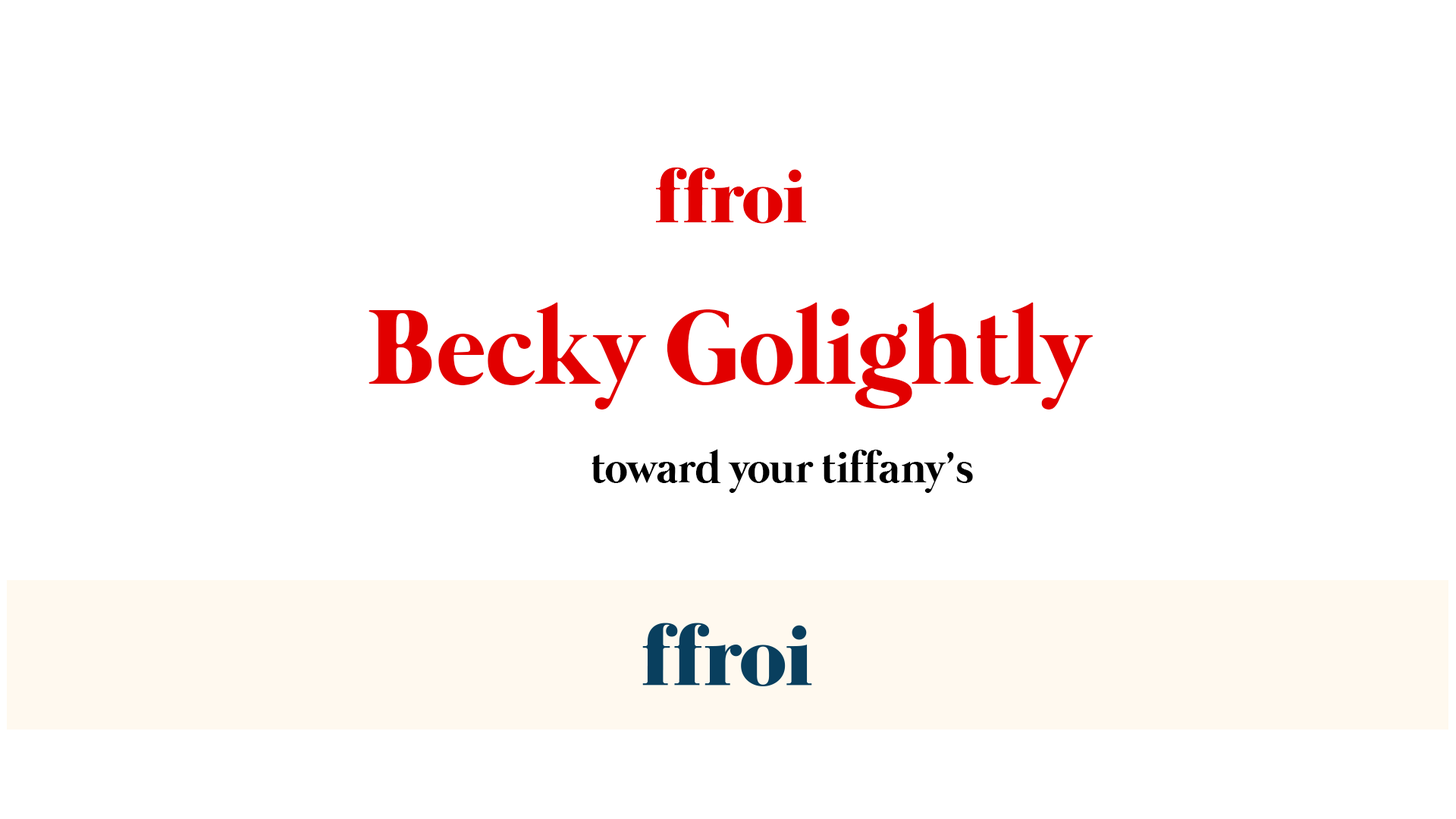
<style>
.page{position:relative;width:1456px;height:819px;background:#ffffff}
.page>*{position:absolute;margin:0}
.t1{font:108.5px "Mermaid-Bold";color:#e20000}
.t2{font:44.2px "Mermaid-Bold";color:#000000}
</style>
<div class="page">
<p class="t1" style="left:369px;top:302px;width:725px;height:107px">Becky Golightly</p>
<p class="t2" style="left:591px;top:449px;width:382px;height:44px">toward your tiffany’s</p>
</div>
